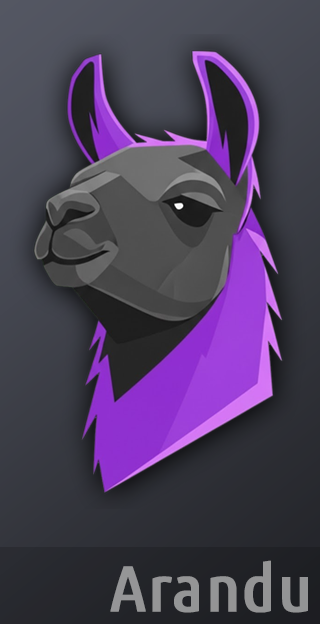
<style>
.page{position:relative;width:320px;height:624px}
.page>*{position:absolute;margin:0}
.t1{font:64.8px "UbuntuCondensed-Regular";color:#949596;font-weight:bold;scale:1.11 1}
</style>
<div class="page">
<p class="t1" style="left:110px;top:560px;width:198px;height:53px">Arandu</p>
</div>
